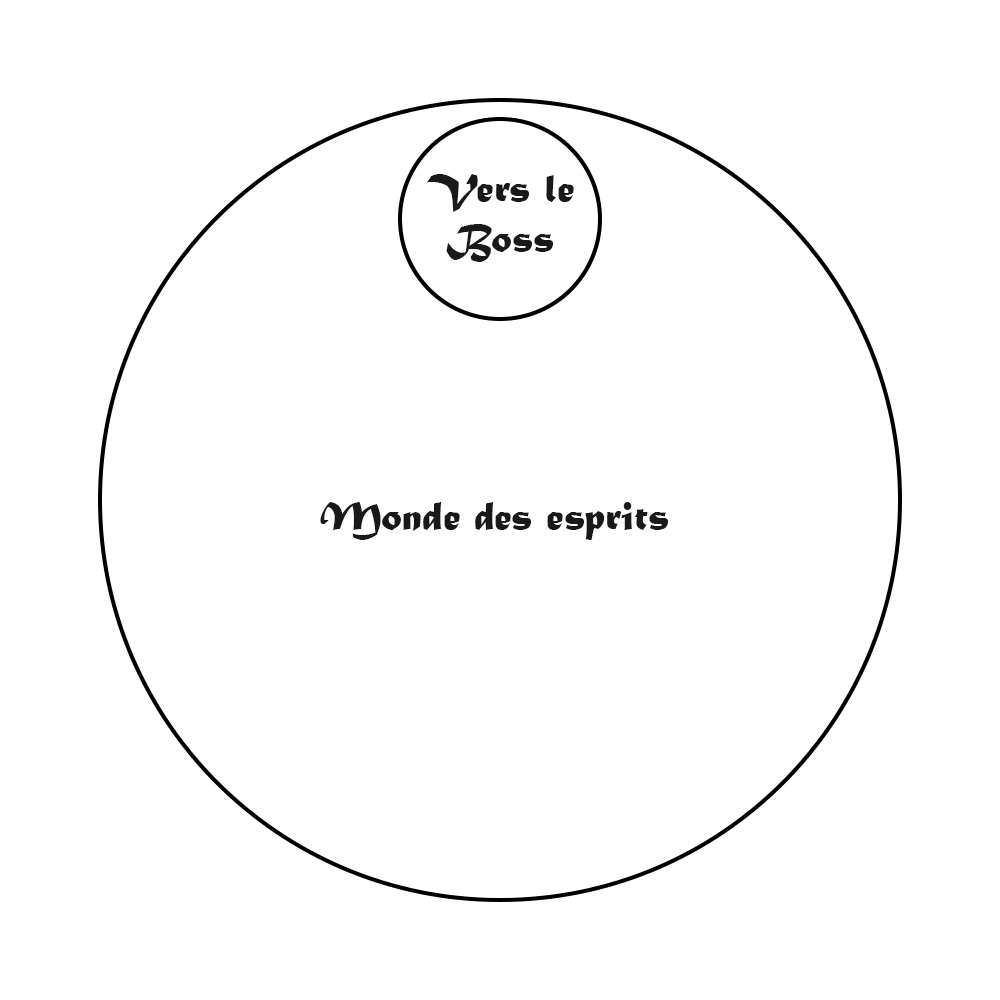
<style>
.page{position:relative;width:1000px;height:1000px;background:#ffffff}
.page>*{position:absolute;margin:0}
.t1{font:41.7px "MaturaMTScriptCapitals";color:#191919}
</style>
<div class="page">
<p class="t1" style="left:427px;top:174px;width:147px;height:88px;text-align:center">Vers le<br>Boss</p>
<p class="t1" style="left:320px;top:502px;width:349px;height:38px">Monde des esprits</p>
</div>
